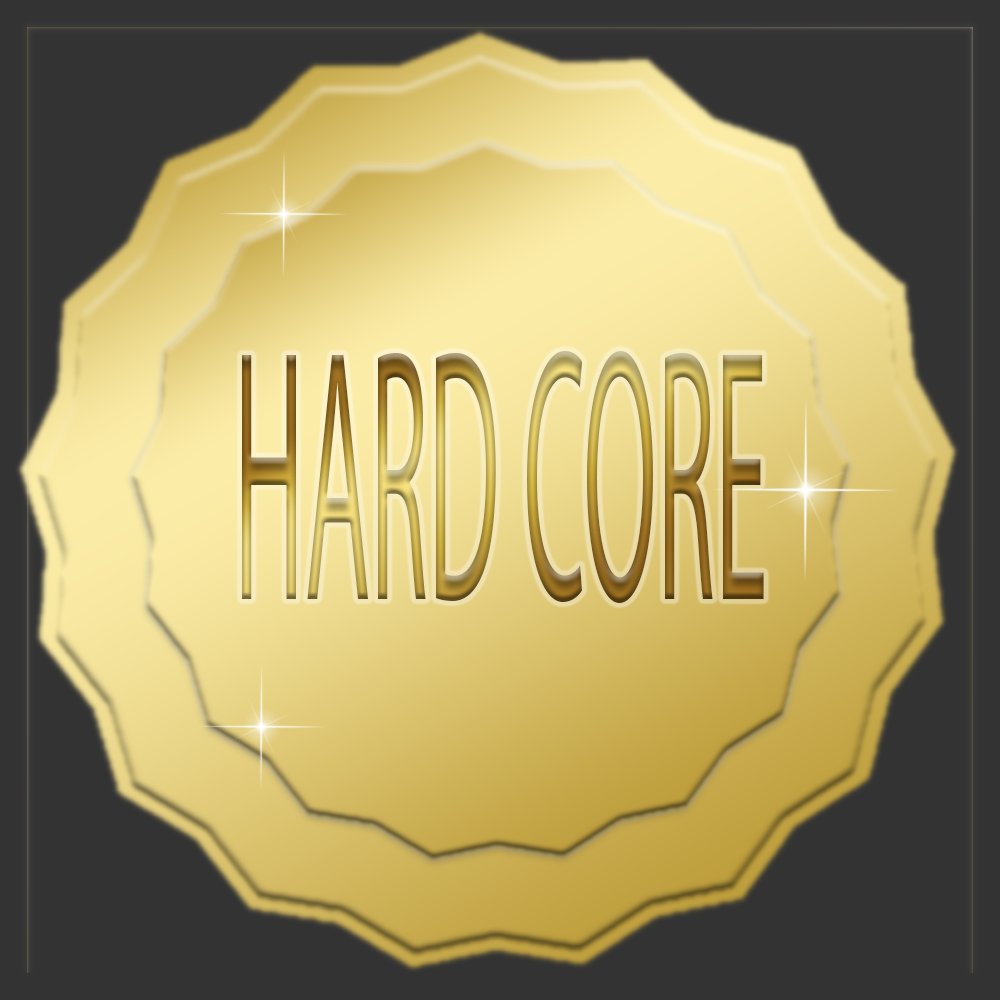
<style>
.page{position:relative;width:1000px;height:1000px;background:#333333}
.page>*{position:absolute;margin:0}
.t1{font:361.4px "MyriadPro-Regular";scale:0.3 1}
</style>
<div class="page">
<p class="t1" style="left:242px;top:350px;width:522px;height:254px">HARD CORE</p>
</div>
